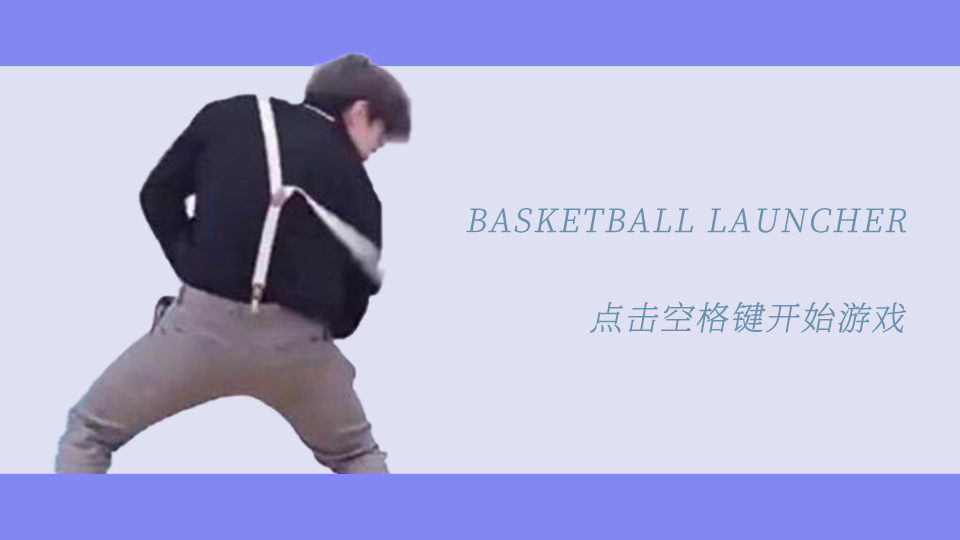
<style>
.page{position:relative;width:960px;height:540px;background:#dfe0f2}
.page>*{position:absolute;margin:0}
.t1{font:32px "SourceHanSerifSC-ExtraLight";letter-spacing:0.039em;color:#6992af;font-weight:bold;font-style:italic}
.t2{font:33px "SourceHanSerifSC-ExtraLight";letter-spacing:0.039em;color:#6992af;font-weight:bold;font-style:italic}
</style>
<div class="page">
<p class="t1" style="left:466px;top:208px;width:440px;height:25px">BASKETBALL LAUNCHER</p>
<p class="t2" style="left:590px;top:301px;width:317px;height:32px">点击空格键开始游戏</p>
</div>
